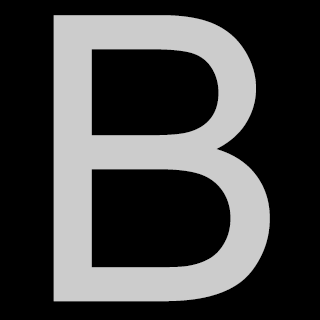
<style>
.page{position:relative;width:320px;height:320px;background:#000000}
.page>*{position:absolute;margin:0}
.t1{font:399.1px "ArialMT";color:#cccccc}
</style>
<div class="page">
<p class="t1" style="left:53px;top:15px;width:217px;height:287px">B</p>
</div>
